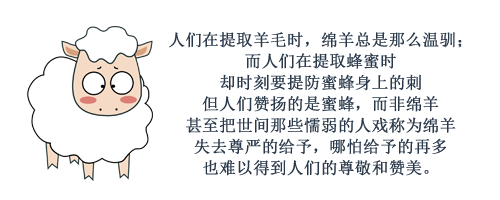
<style>
.page{position:relative;width:500px;height:200px;background:#ffffff}
.page>*{position:absolute;margin:0}
.t1{font:16.5px/21.3px "SimSun";color:#2a394a;font-weight:bold}
</style>
<div class="page">
<p class="t1" style="left:169px;top:32px;width:293px;height:144px;text-align:center">人们在提取羊毛时，绵羊总是那么温驯；<br>而人们在提取蜂蜜时<br>却时刻要提防蜜蜂身上的刺<br>但人们赞扬的是蜜蜂，而非绵羊<br>甚至把世间那些懦弱的人戏称为绵羊<br>失去尊严的给予，哪怕给予的再多<br>也难以得到人们的尊敬和赞美。</p>
</div>
